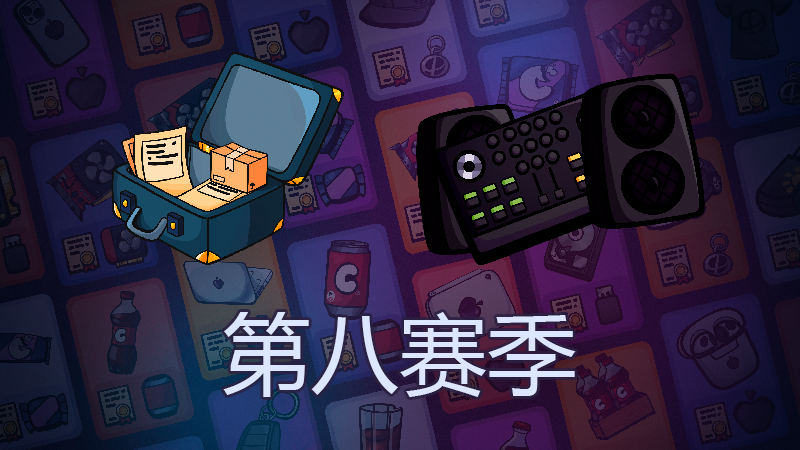
<style>
.page{position:relative;width:800px;height:450px}
.page>*{position:absolute;margin:0}
.t1{font:88.3px "MicrosoftYaHei";color:#dde6ff}
</style>
<div class="page">
<p class="t1" style="left:223px;top:312px;width:353px;height:85px">第八赛季</p>
</div>
